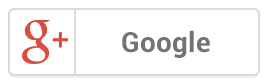
<style>
.page{position:relative;width:268px;height:84px;background:#ffffff}
.page>*{position:absolute;margin:0}
.t1{font:28px "Roboto-Bold";letter-spacing:0.01em;color:#737373}
.t2{font:28px "Roboto-Bold";letter-spacing:0.05em;color:#737373}
</style>
<div class="page">
<p class="t1" style="left:122px;top:30px;width:88px;height:28px">Googl<span class="t2">e</span></p>
</div>
